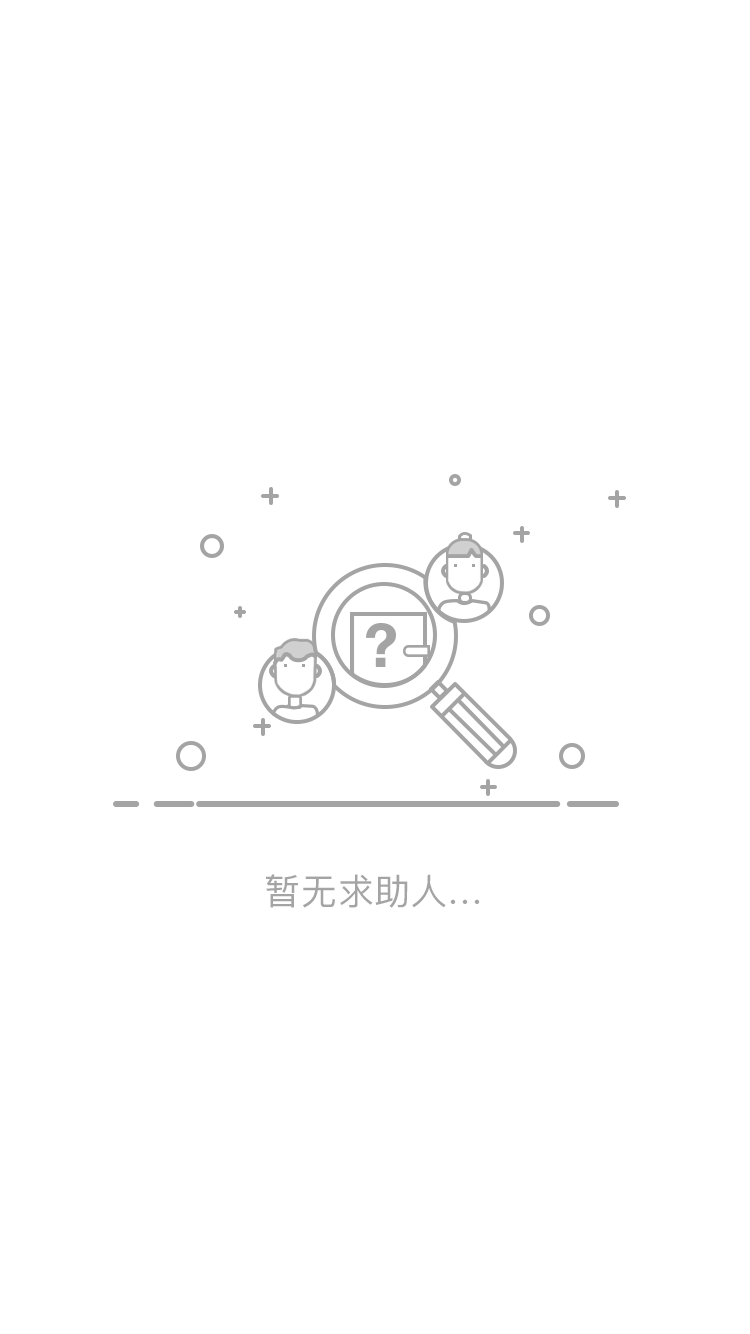
<style>
.page{position:relative;width:750px;height:1334px;background:#ffffff}
.page>*{position:absolute;margin:0}
.t1{font:36px "PingFang-SC-Medium";letter-spacing:0.005em;color:#a4a4a4}
</style>
<div class="page">
<p class="t1" style="left:266px;top:874px;width:214px;height:34px">暂无求助人…</p>
</div>
